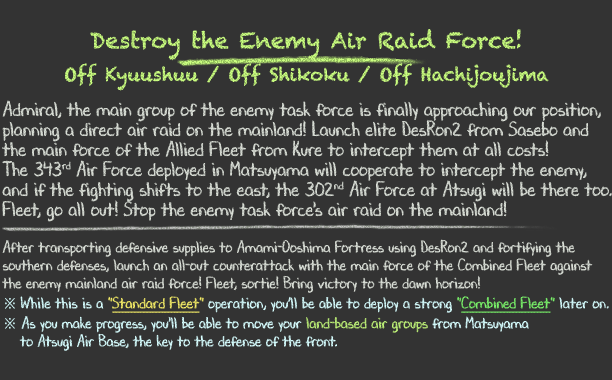
<style>
.page{position:relative;width:612px;height:380px;background:#333333}
.page>*{position:absolute;margin:0}
.t1{font:18px/36px "Chalkduster"}
.t2{font:22px/36px "Chalkduster"}
.t3{font:20px/20px "DJBChalkItUp";color:#d9ded6;scale:0.9 1}
.t4{font:16px/18px "DJBChalkItUp";color:#d9ded6;scale:0.9 1}
.t5{font:16px/20px "DJBChalkItUp";color:#d9ded6;scale:0.9 1}
.t6{font:16px/20px "TimesNewRomanPSMT";color:#d7feff;scale:0.9 1}
.t7{font:16px/20px "DJBChalkItUp";color:#d7feff;scale:0.9 1}
.t8{font:16px/20px "DJBChalkItUp";color:#f5ed68;scale:0.9 1}
.t9{font:16px/20px "DJBChalkItUp";color:#f5ed68;text-decoration:underline;scale:0.9 1}
.t10{font:16px/20px "DJBChalkItUp";color:#7bf26b;scale:0.9 1}
.t11{font:16px/20px "DJBChalkItUp";color:#7bf26b;text-decoration:underline;scale:0.9 1}
.t12{font:16px/18px "TimesNewRomanPSMT";color:#d7feff;scale:0.9 1}
.t13{font:16px/18px "DJBChalkItUp";color:#d7feff;scale:0.9 1}
.t14{font:16px/18px "DJBChalkItUp";color:#bdef78;scale:0.9 1}
</style>
<div class="page">
<p class="t1" style="left:65px;top:29px;width:484px;height:62px;text-align:center"><span class="t2">Destroy the Enemy Air Raid Force!<br></span>Off Kyuushuu / Off Shikoku / Off Hachijoujima</p>
<p class="t3" style="left:2px;top:100px;width:610px;height:251px">Admiral, the main group of the enemy task force is finally approaching our position,<br>planning a direct air raid on the mainland! Launch elite DesRon2 from Sasebo and<br>the main force of the Allied Fleet from Kure to intercept them at all costs!<br>The 343rd Air Force deployed in Matsuyama will cooperate to intercept the enemy,<br>and if the fighting shifts to the east, the 302nd Air Force at Atsugi will be there too.<br>Fleet, go all out! Stop the enemy task force's air raid on the mainland!<br><br><span class="t4">After transporting defensive supplies to Amami-Ooshima Fortress using DesRon2 and fortifying the<br>southern defenses, launch an all-out counterattack with the main force of the Combined Fleet against<br></span><span class="t5">the enemy mainland air raid force! Fleet, sortie! Bring victory to the dawn horizon!<br></span><span class="t6">※ </span><span class="t7">While this is a </span><span class="t8">"</span><span class="t9">Standard Fleet</span><span class="t8">"</span><span class="t7"> operation, you’ll be able to deploy a strong </span><span class="t10">"</span><span class="t11">Combined Fleet</span><span class="t10">" </span><span class="t7">later on.<br></span><span class="t12">※</span><span class="t13"> As you make progress, you'll be able to move your </span><span class="t14">land-based air groups</span><span class="t13"> from Matsuyama<br>　 to Atsugi Air Base, the key to the defense of the front.</span></p>
</div>
